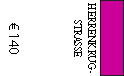
<style>
.page{position:relative;width:124px;height:76px;background:#ffffff}
.page>*{position:absolute;margin:0}
.t1{font:12px "AdobeDevanagari-Regular";color:#000000;scale:0.9 1}
.t2{font:14px "MyriadPro-Regular";color:#000000}
</style>
<div class="page">
<p class="t1" style="left:74px;top:3px;width:22px;height:70px;text-align:center;rotate:90deg">HERRENKRUG-<br>STRASSE</p>
<p class="t2" style="left:9px;top:23px;width:10px;height:31px;rotate:90deg">€ 140</p>
</div>
